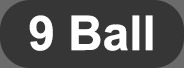
<style>
.page{position:relative;width:184px;height:68px;background:#363636}
.page>*{position:absolute;margin:0}
.t1{font:48px "Arial-BoldMT";color:#ffffff}
</style>
<div class="page">
<p class="t1" style="left:29px;top:15px;width:124px;height:36px">9 Ball</p>
</div>
